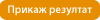
<style>
.page{position:relative;width:100px;height:20px;background:#e68d00}
.page>*{position:absolute;margin:0}
.t1{font:11px "MyriadPro-Semibold";color:#ffffff}
</style>
<div class="page">
<p class="t1" style="left:8px;top:5px;width:84px;height:11px">Прикаж рeзултат</p>
</div>
